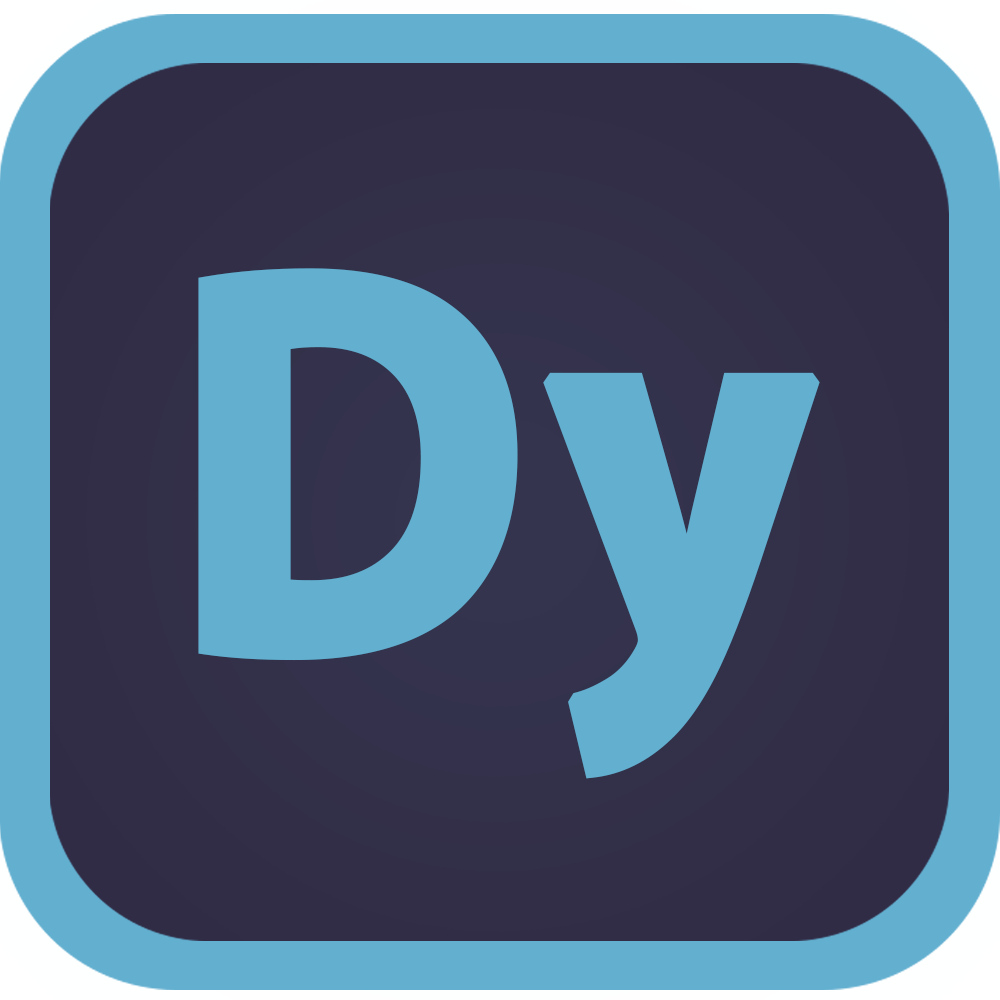
<style>
.page{position:relative;width:1000px;height:1000px;background:#62afd0}
.page>*{position:absolute;margin:0}
.t1{font:550.2px "MyriadPro-Bold";color:#62afd0;font-weight:bold;scale:0.93 1}
</style>
<div class="page">
<p class="t1" style="left:198px;top:268px;width:622px;height:511px">Dy</p>
</div>
